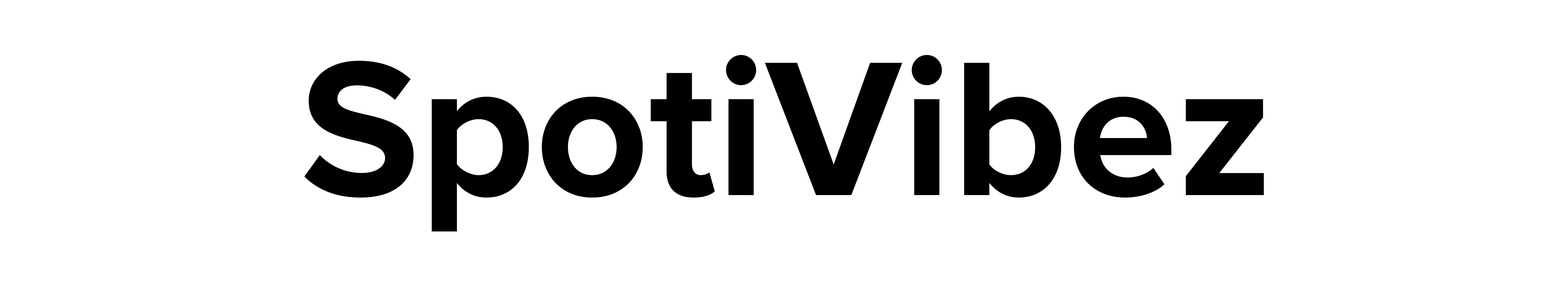
<style>
.page{position:relative;width:1568px;height:286px;background:#ffffff}
.page>*{position:absolute;margin:0}
.t1{font:198.1px "ProximaNova-Bold";color:#000000}
</style>
<div class="page">
<p class="t1" style="left:304px;top:55px;width:960px;height:176px">SpotiVibez</p>
</div>
